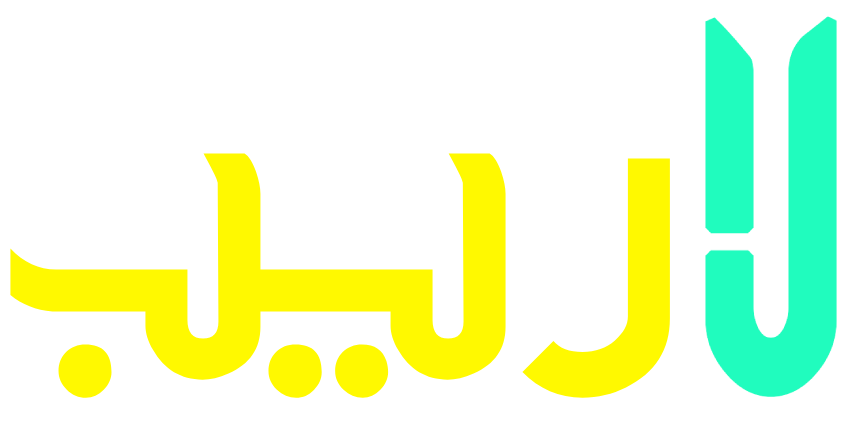
<style>
.page{position:relative;width:865px;height:424px;background:#ffffff}
.page>*{position:absolute;margin:0}
.t1{font:500px "FixedKofiBold";color:#fff900}
</style>
<div class="page">
<p class="t1" style="left:10px;top:153px;width:496px;height:245px">يب</p>
<p class="t1" style="left:522px;top:158px;width:148px;height:240px">ر</p>
</div>
